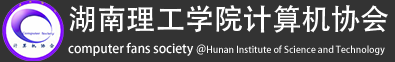
<style>
.page{position:relative;width:395px;height:62px;background:#333333}
.page>*{position:absolute;margin:0}
.t1{font:29.2px "AdobeHeitiStd-Regular";color:#ffffff}
.t2{font:9.2px "AdobeHeitiStd-Regular";color:#ffffff}
.t3{font:12.5px "AdobeHeitiStd-Regular";color:#ffffff}
</style>
<div class="page">
<p class="t1" style="left:69px;top:5px;width:319px;height:28px">湖南理工学院计算机协会</p>
<p class="t2" style="left:68px;top:42px;width:317px;height:14px"><span class="t3">computer fans society @</span>Hunan Institute of Science and Technology</p>
</div>
